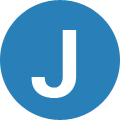
<style>
.page{position:relative;width:120px;height:120px;background:#2980b9}
.page>*{position:absolute;margin:0}
.t1{font:93.6px "Roboto-Bold";letter-spacing:-0.08em;color:#ffffff}
</style>
<div class="page">
<p class="t1" style="left:31px;top:30px;width:46px;height:68px">J</p>
</div>
